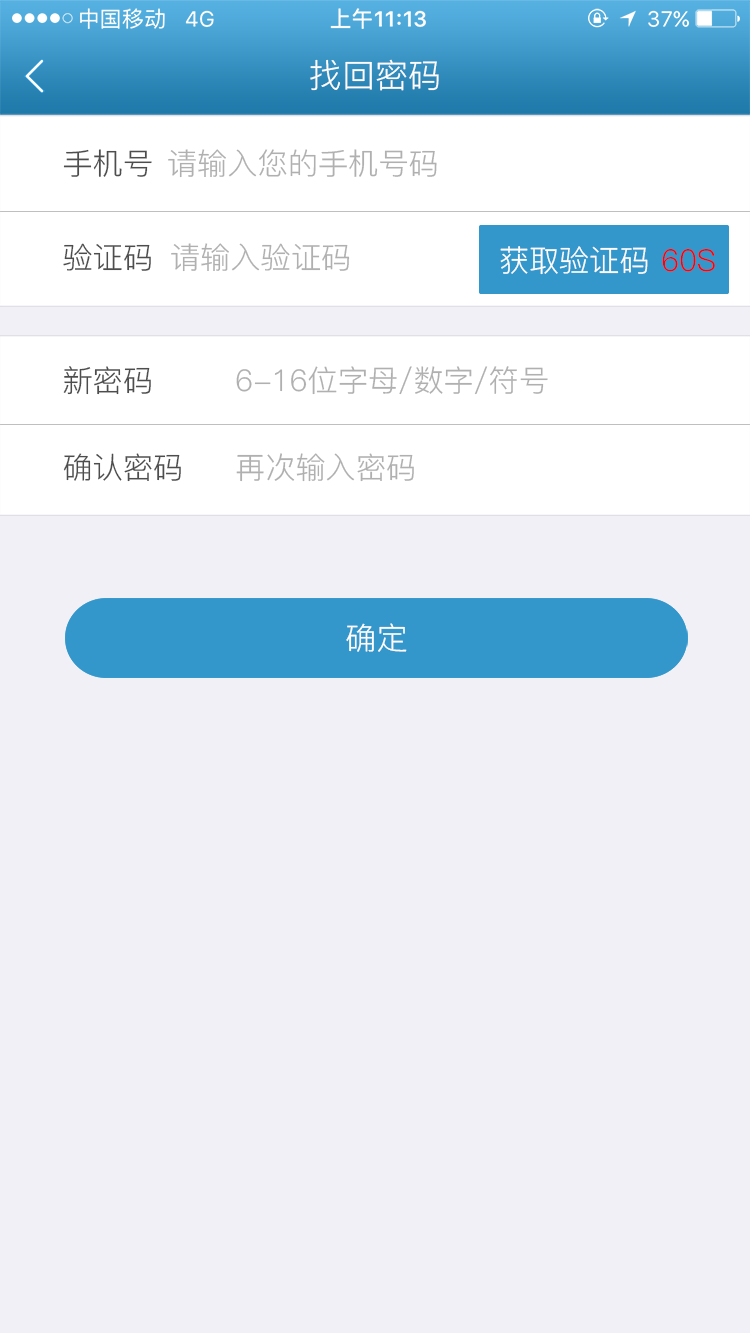
<style>
.page{position:relative;width:750px;height:1333px;background:#f0f0f6}
.page>*{position:absolute;margin:0}
.t1{font:33.3px "PingFang-SC-Regular";color:#ffffff}
.t2{font:30px "PingFang-SC-Regular";color:#4d4d4d}
.t3{font:30px "PingFang-SC-Regular";color:#b0b0b0}
.t4{font:30.2px "PingFang-SC-Regular";color:#ffffff}
.t5{font:30.2px "PingFang-SC-Regular";color:#ff0000}
.t6{font:30.9px "PingFang-SC-Regular";color:#ffffff}
</style>
<div class="page">
<p class="t1" style="left:310px;top:59px;width:129px;height:32px">找回密码</p>
<p class="t2" style="left:63px;top:149px;width:89px;height:28px">手机号</p>
<p class="t3" style="left:168px;top:149px;width:269px;height:29px">请输入您的手机号码</p>
<p class="t2" style="left:63px;top:243px;width:88px;height:28px">验证码</p>
<p class="t3" style="left:171px;top:243px;width:179px;height:29px">请输入验证码</p>
<p class="t4" style="left:500px;top:246px;width:148px;height:29px">获取验证码</p>
<p class="t4" style="left:500px;top:246px;width:148px;height:29px">获取验证码</p>
<p class="t5" style="left:662px;top:248px;width:53px;height:24px">60S</p>
<p class="t2" style="left:63px;top:366px;width:88px;height:29px">新密码</p>
<p class="t3" style="left:236px;top:366px;width:312px;height:29px">6-16位字母/数字/符号</p>
<p class="t2" style="left:63px;top:453px;width:118px;height:29px">确认密码</p>
<p class="t3" style="left:236px;top:453px;width:178px;height:29px">再次输入密码</p>
<p class="t6" style="left:346px;top:623px;width:61px;height:29px">确定</p>
</div>
